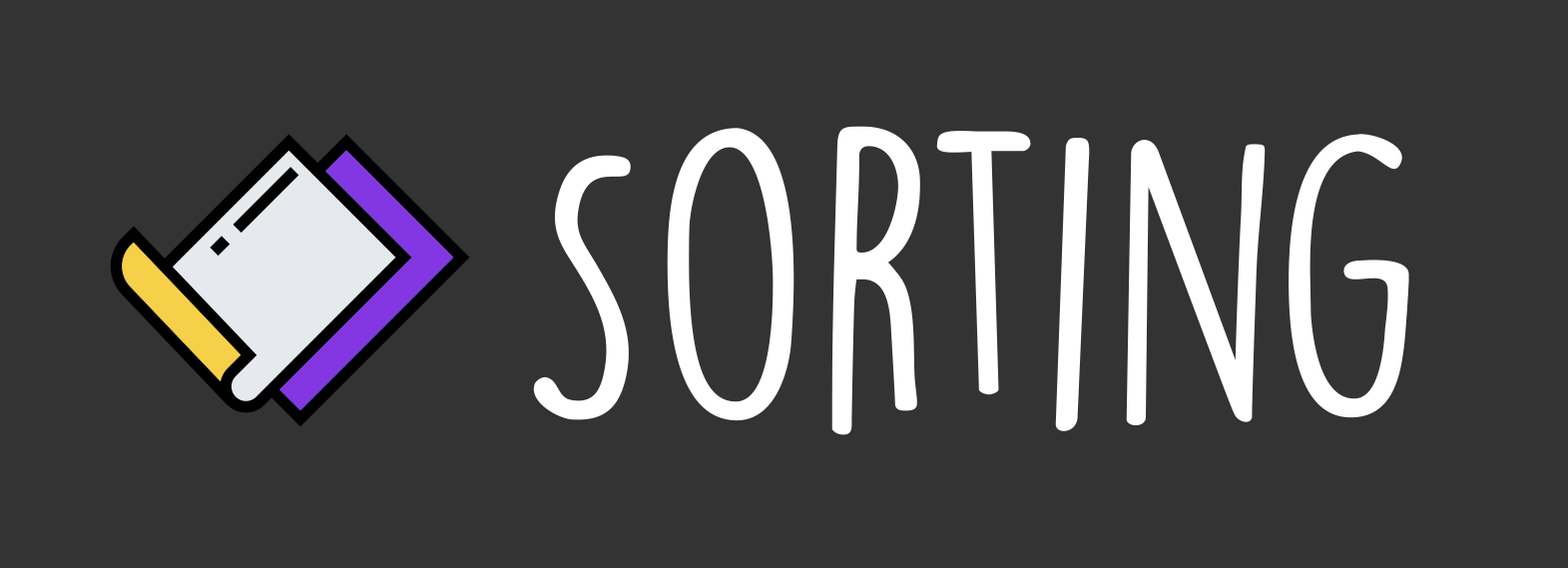
<style>
.page{position:relative;width:1568px;height:568px;background:#333333}
.page>*{position:absolute;margin:0}
.t1{font:375.2px "DKLemonYellowSun";color:#ffffff}
</style>
<div class="page">
<p class="t1" style="left:533px;top:126px;width:876px;height:309px">Sorting</p>
</div>
